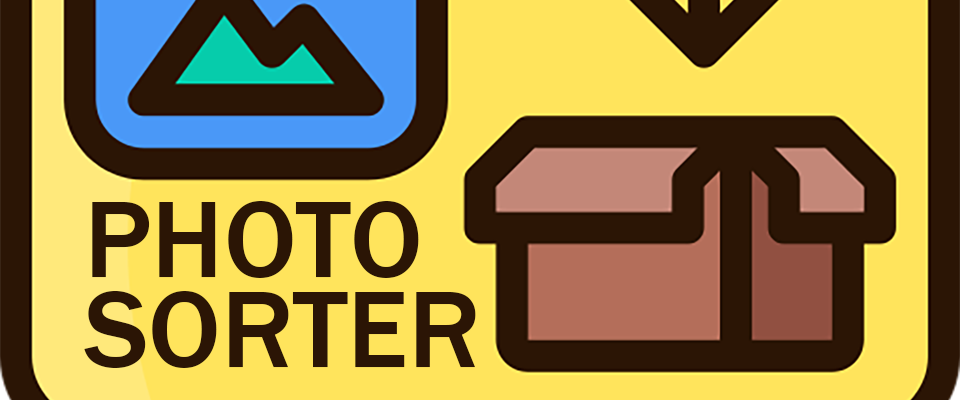
<style>
.page{position:relative;width:960px;height:400px;background:#ffe45c}
.page>*{position:absolute;margin:0}
.t1{font:112.5px/90px "FranklinGothic-Medium";color:#2b1505}
</style>
<div class="page">
<p class="t1" style="left:84px;top:201px;width:392px;height:167px">PHOTO<br>SORTER</p>
</div>
